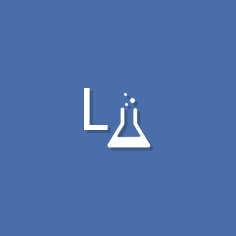
<style>
.page{position:relative;width:236px;height:236px;background:#4a6ea9}
.page>*{position:absolute;margin:0}
.t1{font:58.3px "Lato-Regular";letter-spacing:0.02em;color:#ffffff}
</style>
<div class="page">
<p class="t1" style="left:84px;top:88px;width:24px;height:42px">L</p>
</div>
